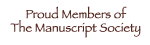
<style>
.page{position:relative;width:150px;height:45px;background:#ffffff}
.page>*{position:absolute;margin:0}
.t1{font:12px/13.5px "Papyrus";letter-spacing:0.01em;color:#55261f}
</style>
<div class="page">
<p class="t1" style="left:10px;top:6px;width:131px;height:32px;text-align:center">Proud Members of<br>The Manuscript Society</p>
</div>
